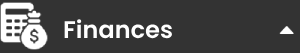
<style>
.page{position:relative;width:300px;height:53px;background:#333333}
.page>*{position:absolute;margin:0}
.t1{font:23.9px "Poppins-SemiBold";color:#ffffff}
</style>
<div class="page">
<p class="t1" style="left:64px;top:19px;width:108px;height:20px">Finances</p>
</div>
